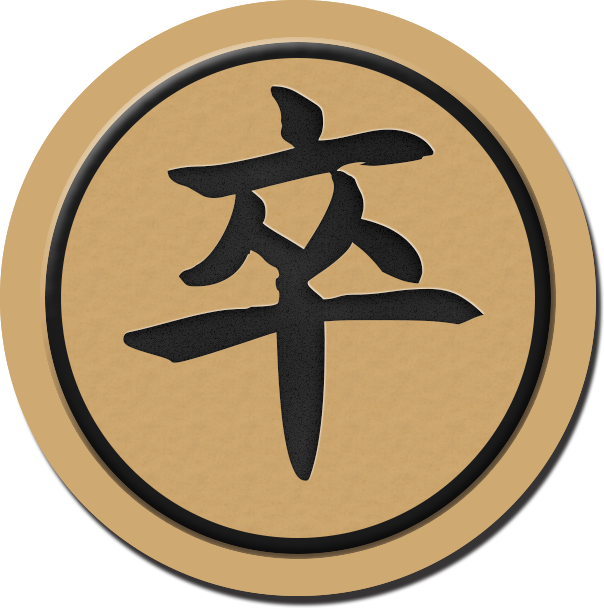
<style>
.page{position:relative;width:604px;height:608px;background:#ffffff}
.page>*{position:absolute;margin:0}
.t1{font:416.7px "AaYuwenlaoshidezi";letter-spacing:0.04em;color:#1b1b1b}
</style>
<div class="page">
<p class="t1" style="left:123px;top:86px;width:361px;height:395px">卒</p>
<p class="t1" style="left:123px;top:86px;width:361px;height:395px">卒</p>
<p class="t1" style="left:123px;top:86px;width:361px;height:395px">卒</p>
<p class="t1" style="left:123px;top:86px;width:361px;height:395px">卒</p>
<p class="t1" style="left:123px;top:86px;width:361px;height:395px">卒</p>
</div>
